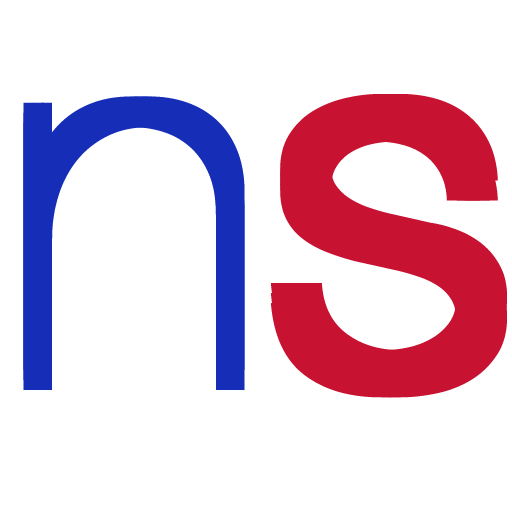
<style>
.page{position:relative;width:512px;height:512px;background:#ffffff}
.page>*{position:absolute;margin:0}
.t1{font:520px "HelveticaNeue-UltraLight";color:#162db7}
.t2{font:520px "HelveticaNeue-Light";color:#c71231}
</style>
<div class="page">
<p class="t1" style="left:23px;top:94px;width:466px;height:284px">n<span class="t2">s</span></p>
<p class="t1" style="left:33px;top:94px;width:466px;height:284px">n<span class="t2">s</span></p>
<p class="t1" style="left:41px;top:94px;width:466px;height:284px">n<span class="t2">s</span></p>
<p class="t1" style="left:23px;top:104px;width:466px;height:284px">n<span class="t2">s</span></p>
<p class="t1" style="left:23px;top:114px;width:466px;height:284px">n<span class="t2">s</span></p>
<p class="t1" style="left:33px;top:114px;width:466px;height:284px">n<span class="t2">s</span></p>
<p class="t1" style="left:41px;top:114px;width:466px;height:284px">n<span class="t2">s</span></p>
</div>
